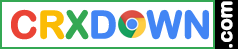
<style>
.page{position:relative;width:238px;height:49px;background:#ffffff}
.page>*{position:absolute;margin:0}
.t1{font:20px "ArialRoundedMTBold";letter-spacing:-0.02em;color:#ffffff;font-weight:bold}
.t2{font:38px "ArialRoundedMTBold";letter-spacing:-0.02em;color:#4285f4;font-weight:bold}
.t3{font:38px "ArialRoundedMTBold";letter-spacing:-0.02em;color:#ea4335;font-weight:bold}
.t4{font:38px "ArialRoundedMTBold";letter-spacing:-0.02em;color:#fbbc05;font-weight:bold}
.t5{font:38px "ArialRoundedMTBold";letter-spacing:-0.02em;color:#34a853;font-weight:bold}
</style>
<div class="page">
<p class="t1" style="left:221px;top:1px;width:12px;height:47px;rotate:-90deg">.com</p>
<p class="t2" style="left:11px;top:9px;width:198px;height:31px"><span class="t3">C</span><span class="t4">R</span><span class="t5">X</span>D   WN</p>
</div>
